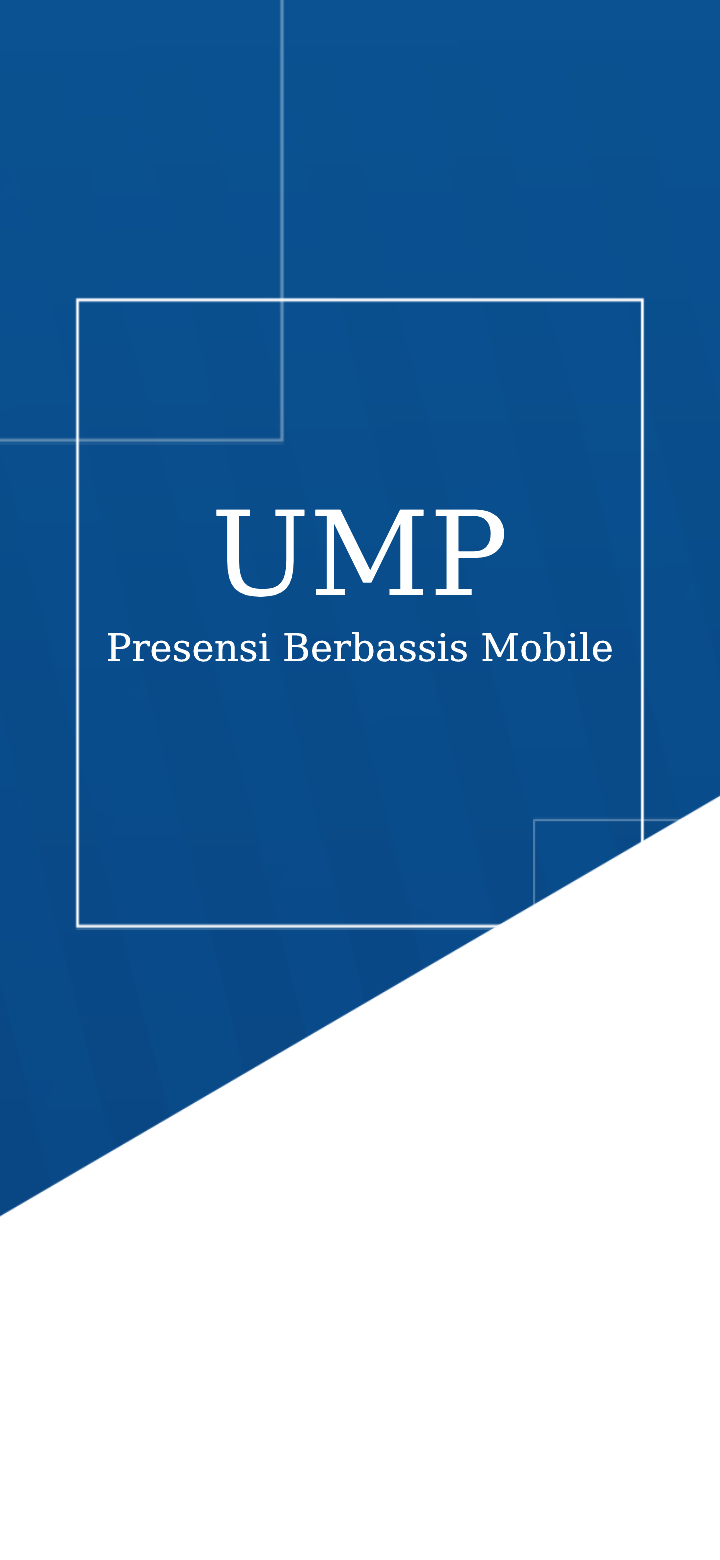
<style>
.page{position:relative;width:720px;height:1560px;background:#ffffff}
.page>*{position:absolute;margin:0}
.t1{font:117px "DejaVuSerif";color:#ffffff}
.t2{font:38px "DejaVuSerif";color:#ffffff}
</style>
<div class="page">
<p class="t1" style="left:216px;top:509px;width:288px;height:88px">UMP</p>
<p class="t2" style="left:108px;top:632px;width:504px;height:30px">Presensi Berbassis Mobile</p>
</div>
